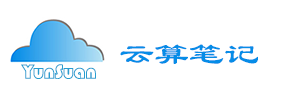
<style>
.page{position:relative;width:300px;height:90px;background:#ffffff}
.page>*{position:absolute;margin:0}
.t1{font:30px "LiSu";color:#068ce7;scale:1.17 1}
.t2{font:20px "STCaiyun";color:#289dd0}
</style>
<div class="page">
<p class="t1" style="left:120px;top:44px;width:138px;height:20px">云算笔记</p>
<p class="t2" style="left:21px;top:64px;width:75px;height:15px">YunSuan</p>
</div>
